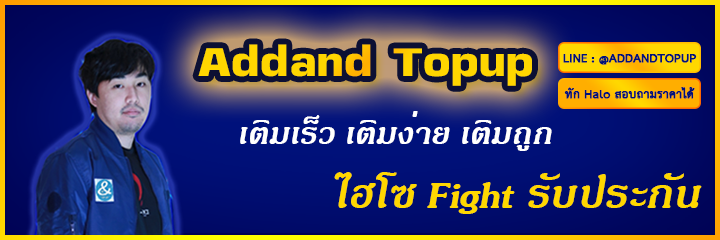
<style>
.page{position:relative;width:720px;height:240px}
.page>*{position:absolute;margin:0}
.t1{font:56px "TP-Kubua";letter-spacing:0.01em;color:#ffd600}
.t2{font:16.4px "THSarabunPSK-Bold";color:#00117a;font-weight:bold}
.t3{font:42px "JasmineDSEBoldItalic";color:#ffffff}
.t4{font:56px "JasmineDSEBoldItalic";color:#ffd700}
</style>
<div class="page">
<p class="t1" style="left:198px;top:44px;width:334px;height:42px">Addand Topup</p>
<p class="t2" style="left:563px;top:54px;width:134px;height:11px">LINE : @ADDANDTOPUP</p>
<p class="t2" style="left:564px;top:87px;width:131px;height:12px">ทัก Halo สอบถามราคาได้</p>
<p class="t3" style="left:240px;top:111px;width:312px;height:40px">เติมเร็ว เติมง่าย เติมถูก</p>
<p class="t4" style="left:334px;top:172px;width:368px;height:42px">ไฮโซ Fight รับประกัน</p>
</div>
